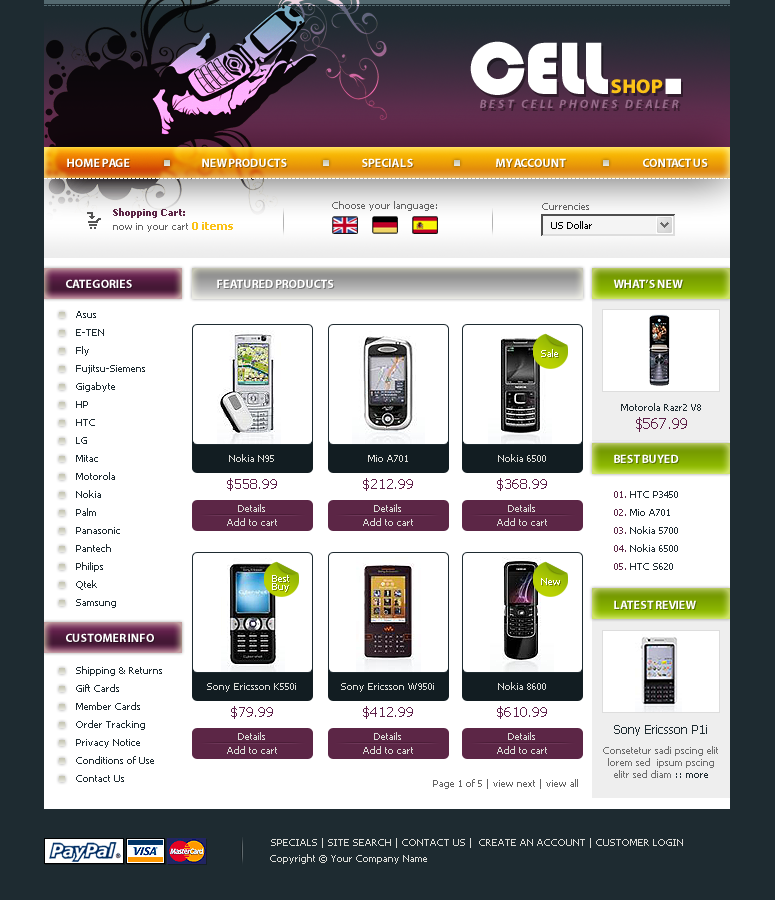
<style>
.page{position:relative;width:775px;height:900px;background:#ffffff}
.page>*{position:absolute;margin:0}
.t1{font:10px "Tahoma";color:#546970}
.t2{font:72px "BlippoBT-Black";letter-spacing:-0.01em;color:#ffffff}
.t3{font:20px "MyriadPro-Black";letter-spacing:-0.01em;color:#fbc217}
.t4{font:12px "MyriadPro-BoldIt";letter-spacing:0.21em;color:#966b8a}
.t5{font:12px "MyriadPro-Bold";letter-spacing:-0.01em;color:#ffffff}
.t6{font:10px "Tahoma";color:#ffffff}
.t7{font:10px "Tahoma";color:#636363}
.t8{font:10px "Tahoma-Bold";color:#5c2646}
.t9{font:11.1px "Tahoma-Bold";color:#fbc217}
.t10{font:10px "Tahoma";color:#000000}
.t11{font:10px/18px "Tahoma";color:#1e2b31}
.t12{font:15px/18px "Tahoma";color:#5d1f48}
.t13{font:10px "Tahoma";color:#dcdcd8}
.t14{font:14px "Tahoma";color:#5d1f48}
.t15{font:10px/18px "Tahoma";color:#5c2646}
.t16{font:10px/14px "Tahoma";color:#dcdcd8}
.t17{font:10px/8px "Tahoma";color:#ffffff}
.t18{font:12px "Tahoma";color:#1e2b31}
.t19{font:10px/12px "Tahoma";color:#6f6f6f}
.t20{font:10px/12px "Tahoma";color:#1e2b31}
.t21{font:10px "Tahoma";color:#dcdcd8;text-transform:uppercase}
</style>
<div class="page">
<p class="t1" style="left:36px;top:5px;width:699px;height:1px">-------------------------------------------------------------------------------------------------------------------------------------------------------------------------------</p>
<p class="t2" style="left:470px;top:41px;width:138px;height:54px">CELL</p>
<p class="t3" style="left:611px;top:79px;width:52px;height:15px">SHOP</p>
<p class="t4" style="left:480px;top:99px;width:199px;height:9px">BEST CELL PHONES DEALER</p>
<p class="t5" style="left:67px;top:158px;width:63px;height:9px">HOME PAGE</p>
<p class="t5" style="left:202px;top:158px;width:85px;height:9px">NEW PRODUCTS</p>
<p class="t5" style="left:362px;top:158px;width:51px;height:9px">SPECIALS</p>
<p class="t5" style="left:496px;top:158px;width:70px;height:9px">MY ACCOUNT</p>
<p class="t5" style="left:643px;top:158px;width:65px;height:9px">CONTACT US</p>
<p class="t6" style="left:36px;top:178px;width:699px;height:1px">-------------------------------------------------------------------------------------------------------------------------------------------------------------------------------</p>
<p class="t7" style="left:113px;top:208px;width:120px;height:24px"><span class="t8">Shopping Cart:<br></span>now in your cart <span class="t9">0 items</span></p>
<p class="t7" style="left:332px;top:201px;width:105px;height:10px">Choose your language:</p>
<p class="t7" style="left:542px;top:203px;width:47px;height:7px">Currencies</p>
<p class="t10" style="left:551px;top:221px;width:41px;height:8px">US Dollar</p>
<p class="t5" style="left:66px;top:279px;width:66px;height:9px">CATEGORIES</p>
<p class="t5" style="left:217px;top:279px;width:117px;height:9px">FEATURED PRODUCTS</p>
<p class="t5" style="left:613px;top:279px;width:70px;height:9px">WHAT’S NEW</p>
<p class="t11" style="left:76px;top:311px;width:69px;height:297px">Asus<br>E-TEN<br>Fly<br>Fujitsu-Siemens<br>Gigabyte<br>HP <br>HTC<br>LG<br>Mitac<br>Motorola<br>Nokia<br>Palm<br>Panasonic<br>Pantech<br>Philips<br>Qtek<br>Samsung</p>
<p class="t6" style="left:541px;top:349px;width:17px;height:8px">Sale</p>
<p class="t11" style="left:621px;top:403px;width:80px;height:29px;text-align:center">Motorola Razr2 V8<br><span class="t12">$567.99</span></p>
<p class="t13" style="left:229px;top:454px;width:45px;height:8px">Nokia N95</p>
<p class="t13" style="left:368px;top:455px;width:40px;height:7px">Mio A701</p>
<p class="t13" style="left:498px;top:454px;width:48px;height:8px">Nokia 6500</p>
<p class="t5" style="left:614px;top:454px;width:65px;height:9px">BEST BUYED</p>
<p class="t14" style="left:227px;top:478px;width:50px;height:13px">$558.99</p>
<p class="t14" style="left:363px;top:478px;width:50px;height:13px">$212.99</p>
<p class="t14" style="left:497px;top:478px;width:50px;height:13px">$368.99</p>
<p class="t11" style="left:614px;top:491px;width:64px;height:79px"><span class="t15">01.</span> HTC P3450<br><span class="t15">02. </span>Mio A701<br><span class="t15">03. </span>Nokia 5700<br><span class="t15">04.</span> Nokia 6500<br><span class="t15">05.</span> HTC S620</p>
<p class="t16" style="left:227px;top:504px;width:50px;height:22px;text-align:center">Details<br>Add to cart</p>
<p class="t16" style="left:363px;top:504px;width:50px;height:22px;text-align:center">Details<br>Add to cart</p>
<p class="t16" style="left:497px;top:504px;width:50px;height:22px;text-align:center">Details<br>Add to cart</p>
<p class="t17" style="left:272px;top:575px;width:17px;height:17px">Best <br>Buy</p>
<p class="t6" style="left:541px;top:578px;width:19px;height:7px">New</p>
<p class="t5" style="left:614px;top:600px;width:82px;height:9px">LATEST REVIEW</p>
<p class="t5" style="left:66px;top:633px;width:88px;height:9px">CUSTOMER INFO</p>
<p class="t11" style="left:76px;top:666px;width:86px;height:116px">Shipping &amp; Returns<br>Gift Cards<br>Member Cards<br>Order Tracking<br>Privacy Notice<br>Conditions of Use<br>Contact Us</p>
<p class="t13" style="left:207px;top:683px;width:89px;height:9px">Sony Ericsson K550i</p>
<p class="t13" style="left:341px;top:683px;width:93px;height:9px">Sony Ericsson W950i</p>
<p class="t13" style="left:498px;top:682px;width:48px;height:8px">Nokia 8600</p>
<p class="t14" style="left:231px;top:706px;width:42px;height:13px">$79.99</p>
<p class="t14" style="left:363px;top:706px;width:50px;height:13px">$412.99</p>
<p class="t14" style="left:497px;top:706px;width:50px;height:13px">$610.99</p>
<p class="t18" style="left:614px;top:725px;width:93px;height:11px">Sony Ericsson P1i</p>
<p class="t16" style="left:227px;top:732px;width:50px;height:22px;text-align:center">Details<br>Add to cart</p>
<p class="t16" style="left:363px;top:732px;width:50px;height:22px;text-align:center">Details<br>Add to cart</p>
<p class="t16" style="left:497px;top:732px;width:50px;height:22px;text-align:center">Details<br>Add to cart</p>
<p class="t19" style="left:603px;top:746px;width:115px;height:32px;text-align:center">Consetetur sadi pscing elit lorem sed  ipsum pscing elitr sed diam<span class="t20"> :: more</span></p>
<p class="t7" style="left:433px;top:779px;width:145px;height:10px">Page 1 of 5 | view next | view all</p>
<p class="t21" style="left:271px;top:838px;width:412px;height:10px">Specials | Site Search | Contact Us |  Create an Account | Customer Login</p>
<p class="t13" style="left:270px;top:854px;width:157px;height:10px">Copyright © Your Company Name</p>
</div>
